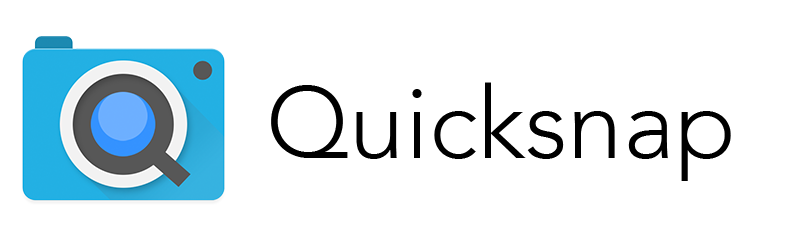
<style>
.page{position:relative;width:800px;height:250px;background:#ffffff}
.page>*{position:absolute;margin:0}
.t1{font:100px "Avenir-Light";color:#000000}
</style>
<div class="page">
<p class="t1" style="left:271px;top:82px;width:460px;height:99px">Quicksnap</p>
</div>
